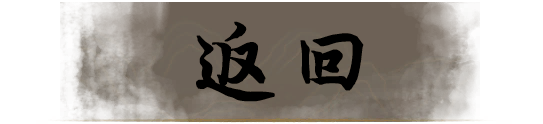
<style>
.page{position:relative;width:543px;height:124px;background:#ffffff}
.page>*{position:absolute;margin:0}
.t1{font:96px "HYHeLongXingShuW";color:#000000;font-weight:bold}
</style>
<div class="page">
<p class="t1" style="left:196px;top:21px;width:168px;height:81px">返回</p>
</div>
